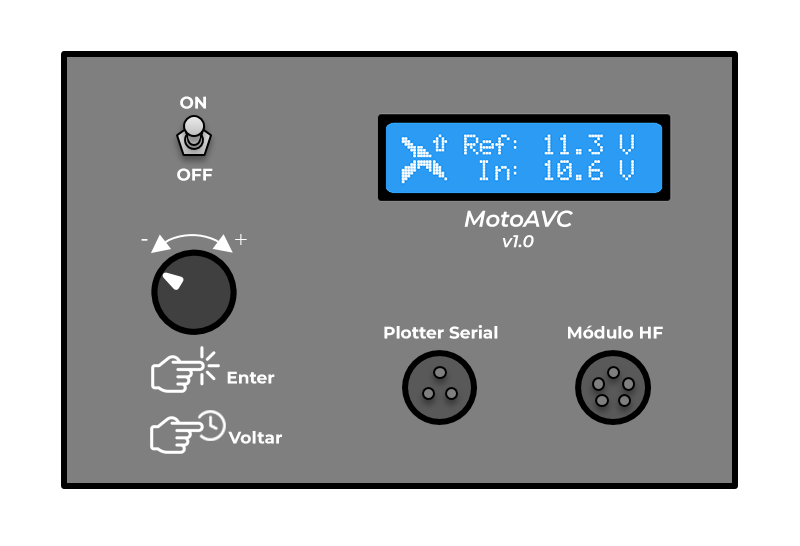
<style>
.page{position:relative;width:800px;height:546px;background:#7f7f7f}
.page>*{position:absolute;margin:0}
.t1{font:17px "Montserrat-Bold";color:#ffffff}
.t2{font:22.7px "Montserrat-SemiBoldItalic";color:#ffffff}
.t3{font:17px "Montserrat-SemiBoldItalic";color:#ffffff}
</style>
<div class="page">
<p class="t1" style="left:180px;top:96px;width:26px;height:13px">ON</p>
<p class="t1" style="left:177px;top:168px;width:36px;height:13px">OFF</p>
<p class="t2" style="left:464px;top:210px;width:109px;height:38px;text-align:center">MotoAVC<br><span class="t3">v1.0</span></p>
<p class="t1" style="left:384px;top:325px;width:114px;height:14px">Plotter Serial</p>
<p class="t1" style="left:568px;top:325px;width:95px;height:14px">Módulo HF</p>
<p class="t1" style="left:227px;top:371px;width:48px;height:13px">Enter</p>
<p class="t1" style="left:228px;top:431px;width:54px;height:13px">Voltar</p>
</div>
